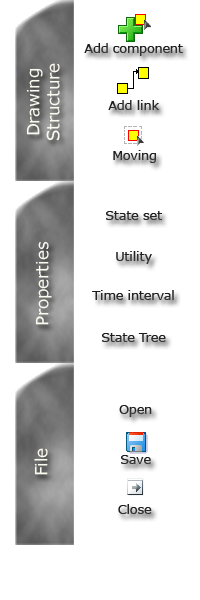
<style>
.page{position:relative;width:200px;height:600px;background:#ffffff}
.page>*{position:absolute;margin:0}
.t1{font:12.5px "Verdana";color:#666666}
.t2{font:16.7px "Verdana";color:#efedde}
</style>
<div class="page">
<p class="t1" style="left:84px;top:43px;width:99px;height:13px">Add component</p>
<p class="t2" style="left:26px;top:63px;width:34px;height:78px;text-align:center;rotate:-90deg">Drawing <br>Structure</p>
<p class="t1" style="left:108px;top:100px;width:52px;height:10px">Add link</p>
<p class="t1" style="left:113px;top:150px;width:43px;height:13px">Moving</p>
<p class="t1" style="left:106px;top:211px;width:56px;height:9px">State set</p>
<p class="t2" style="left:35px;top:241px;width:17px;height:84px;rotate:-90deg">Properties</p>
<p class="t1" style="left:116px;top:251px;width:36px;height:13px">Utility</p>
<p class="t1" style="left:92px;top:290px;width:82px;height:10px">Time interval</p>
<p class="t1" style="left:102px;top:333px;width:64px;height:9px">State Tree</p>
<p class="t1" style="left:119px;top:405px;width:33px;height:12px">Open</p>
<p class="t2" style="left:34px;top:448px;width:14px;height:27px;rotate:-90deg">File</p>
<p class="t1" style="left:121px;top:455px;width:30px;height:9px">Save</p>
<p class="t1" style="left:118px;top:504px;width:34px;height:10px">Close</p>
</div>
